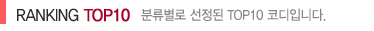
<style>
.page{position:relative;width:374px;height:31px;background:#ffffff}
.page>*{position:absolute;margin:0}
.t1{font:17px "YDIYGO330";letter-spacing:-0.025em;color:#292929;scale:0.91 1}
.t2{font:17px "YDIYGO330";letter-spacing:-0.025em;color:#a60328;font-weight:bold;scale:0.91 1}
.t3{font:13.8px "YDIYGO330";letter-spacing:-0.025em;color:#868686;scale:0.91 1}
</style>
<div class="page">
<p class="t1" style="left:17px;top:8px;width:113px;height:14px">RANKING <span class="t2">TOP10</span></p>
<p class="t3" style="left:141px;top:8px;width:185px;height:13px">분류별로 선정된 TOP10 코디입니다.</p>
</div>
